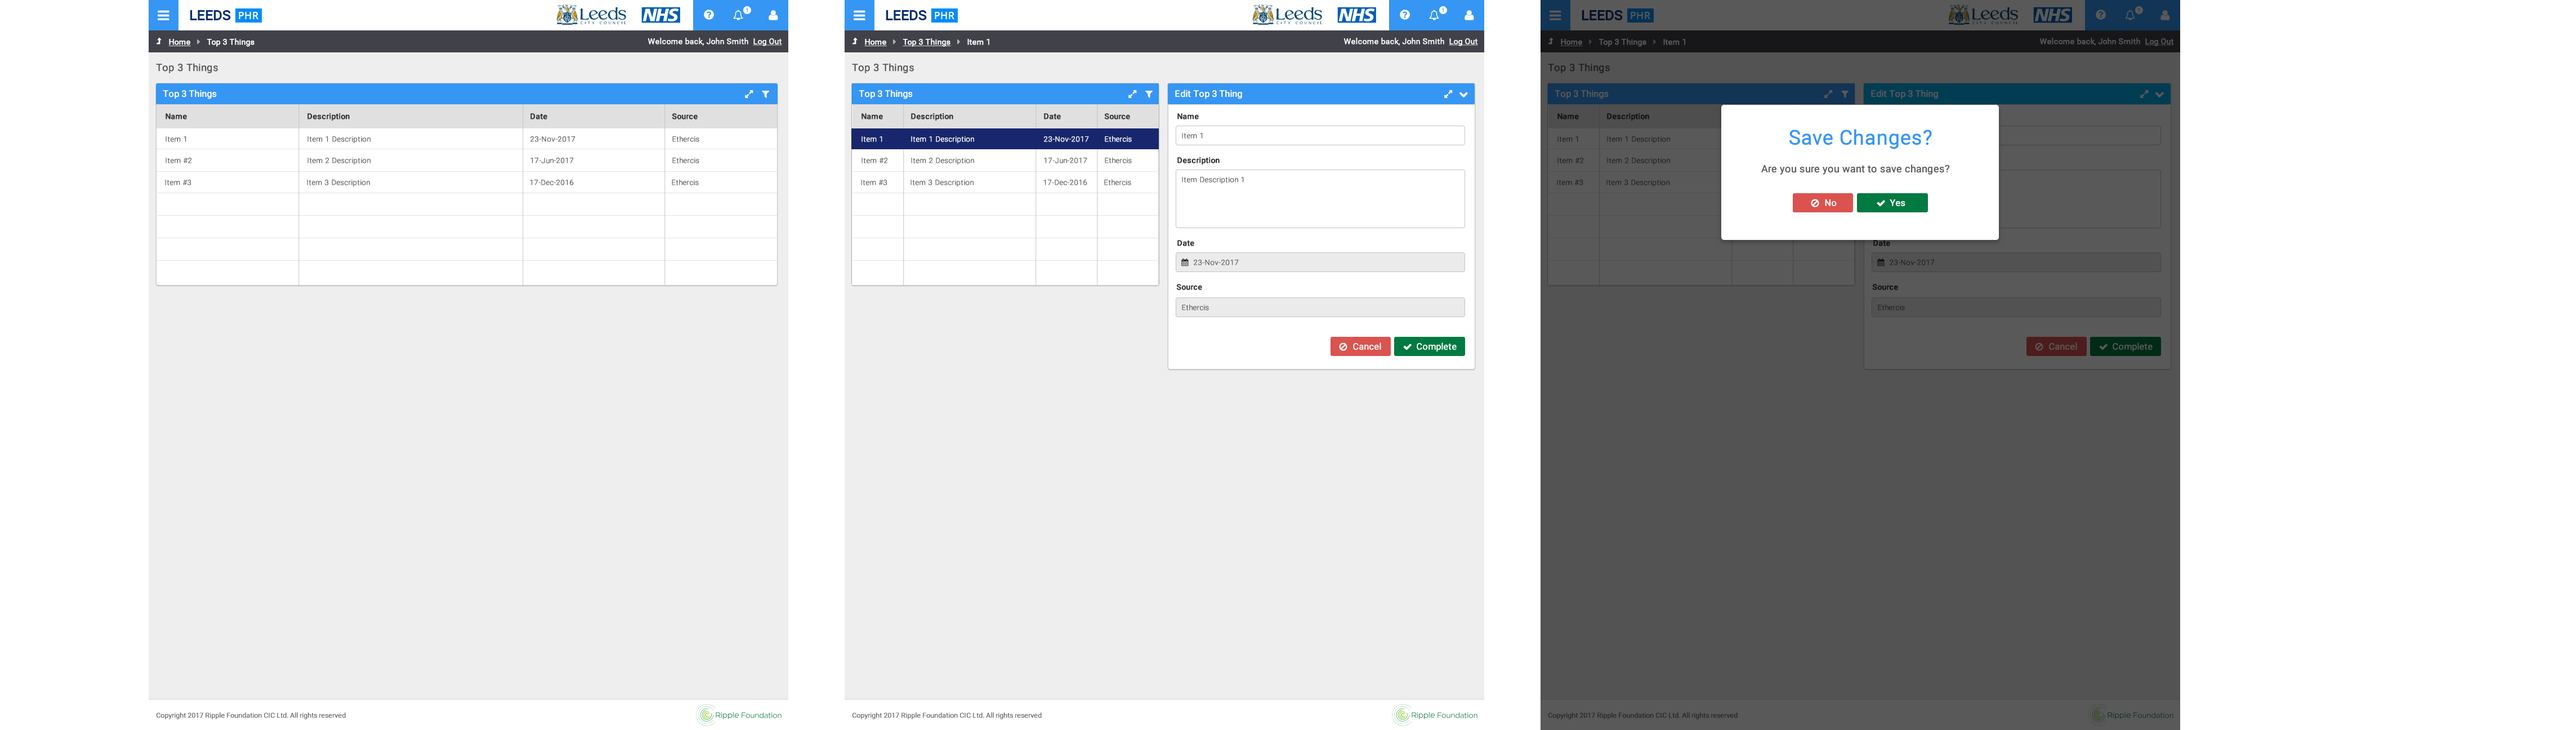
<style>
.page{position:relative;width:2576px;height:730px;background:#ffffff}
.page>*{position:absolute;margin:0}
.t1{font:10.1px "Roboto-Regular";color:#555555;font-weight:bold}
.t2{font:10.1px "Roboto-Regular";color:#1e1e1e;font-weight:bold}
.t3{font:9px "Roboto-Regular";color:#ffffff;font-weight:bold}
.t4{font:9px "Roboto-Regular";color:#595959;font-weight:bold}
.t5{font:7.9px "Roboto-Medium";color:#333333;font-weight:bold}
.t6{font:7.3px "Roboto-Light";color:#5c5c5c;font-weight:bold}
.t7{font:7.3px "Roboto-Light";color:#ffffff;font-weight:bold}
.t8{font:20.3px "Roboto-Regular";color:#3596f4;font-weight:bold}
.t9{font:10.1px "Roboto-Regular";color:#5c5c5c;font-weight:bold}
.t10{font:7.9px "Roboto-Medium";color:#111111;font-weight:bold}
.t11{font:7.9px "Roboto-Medium";color:#121212;font-weight:bold}
.t12{font:7.3px "Roboto-Light";color:#202020;font-weight:bold}
</style>
<div class="page">
<p class="t1" style="left:156px;top:63px;width:62px;height:10px">Top 3 Things</p>
<p class="t1" style="left:852px;top:63px;width:62px;height:10px">Top 3 Things</p>
<p class="t2" style="left:1548px;top:63px;width:62px;height:10px">Top 3 Things</p>
<p class="t3" style="left:163px;top:90px;width:54px;height:9px">Top 3 Things</p>
<p class="t3" style="left:859px;top:90px;width:54px;height:9px">Top 3 Things</p>
<p class="t3" style="left:1175px;top:90px;width:67px;height:9px">Edit Top 3 Thing</p>
<p class="t4" style="left:1555px;top:90px;width:54px;height:9px">Top 3 Things</p>
<p class="t4" style="left:1871px;top:90px;width:67px;height:9px">Edit Top 3 Thing</p>
<p class="t5" style="left:166px;top:113px;width:532px;height:8px">Name      Description         Date       Source</p>
<p class="t5" style="left:861px;top:113px;width:269px;height:8px">Name     Description     Date   Source</p>
<p class="t5" style="left:1177px;top:113px;width:22px;height:6px">Name</p>
<p class="t6" style="left:166px;top:136px;width:533px;height:8px">Item 1      Item 1 Description        23-Nov-2017     Ethercis</p>
<p class="t7" style="left:861px;top:136px;width:271px;height:8px">Item 1     Item 1 Description    23-Nov-2017 Ethercis</p>
<p class="t6" style="left:1182px;top:133px;width:21px;height:6px">Item 1</p>
<p class="t8" style="left:1789px;top:129px;width:143px;height:20px">Save Changes?</p>
<p class="t6" style="left:166px;top:157px;width:533px;height:8px">Item #2      Item 2 Description        17-Jun-2017     Ethercis</p>
<p class="t6" style="left:861px;top:157px;width:271px;height:8px">Item #2     Item 2 Description    17-Jun-2017 Ethercis</p>
<p class="t5" style="left:1177px;top:157px;width:43px;height:8px">Description</p>
<p class="t9" style="left:1761px;top:164px;width:188px;height:11px">Are you sure you want to save changes?</p>
<p class="t6" style="left:165px;top:179px;width:534px;height:8px">Item #3      Item 3 Description        17-Dec-2016     Ethercis</p>
<p class="t6" style="left:861px;top:179px;width:270px;height:8px">Item #3     Item 3 Description    17-Dec-2016 Ethercis</p>
<p class="t6" style="left:1182px;top:177px;width:62px;height:7px">Item Description 1</p>
<p class="t3" style="left:1825px;top:199px;width:12px;height:7px">No</p>
<p class="t3" style="left:1890px;top:199px;width:15px;height:7px">Yes</p>
<p class="t5" style="left:1177px;top:240px;width:17px;height:6px">Date</p>
<p class="t10" style="left:1873px;top:240px;width:17px;height:6px">Date</p>
<p class="t5" style="left:1176px;top:284px;width:26px;height:6px">Source</p>
<p class="t11" style="left:1872px;top:284px;width:26px;height:6px">Source</p>
<p class="t6" style="left:1182px;top:304px;width:27px;height:6px">Ethercis</p>
<p class="t12" style="left:1878px;top:304px;width:27px;height:6px">Ethercis</p>
</div>
